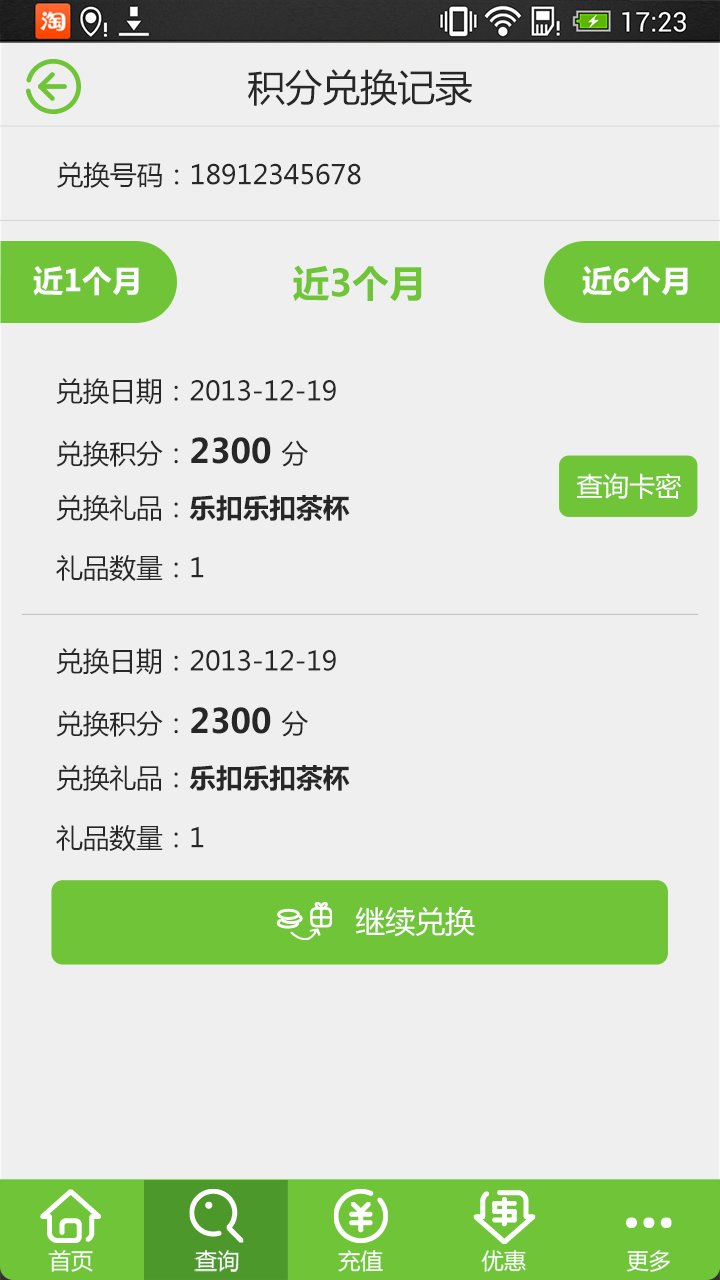
<style>
.page{position:relative;width:720px;height:1280px;background:#efefef}
.page>*{position:absolute;margin:0}
.t1{font:37.5px "MicrosoftYaHei";color:#272727}
.t2{font:26.7px "MicrosoftYaHei";color:#272727}
.t3{font:30px "MicrosoftYaHei-Bold";color:#fdfdfd}
.t4{font:36.7px "MicrosoftYaHei-Bold";color:#6fc537}
.t5{font:26.7px/56.7px "MicrosoftYaHei";color:#272727}
.t6{font:26.7px/60px "MicrosoftYaHei";color:#272727}
.t7{font:33.3px/60px "MicrosoftYaHei-Bold";color:#272727}
.t8{font:26.7px/60px "MicrosoftYaHei-Bold";color:#272727}
.t9{font:26.3px "MicrosoftYaHei";color:#ffffff}
.t10{font:30px "MicrosoftYaHei";color:#ffffff}
.t11{font:22.2px "MicrosoftYaHei";color:#ffffff}
</style>
<div class="page">
<p class="t1" style="left:248px;top:69px;width:224px;height:37px">积分兑换记录</p>
<p class="t2" style="left:57px;top:161px;width:304px;height:27px">兑换号码：18912345678</p>
<p class="t3" style="left:33px;top:266px;width:106px;height:30px">近1个月</p>
<p class="t4" style="left:293px;top:265px;width:129px;height:37px">近3个月</p>
<p class="t3" style="left:582px;top:266px;width:106px;height:30px">近6个月</p>
<p class="t5" style="left:56px;top:378px;width:294px;height:204px">兑换日期：2013-12-19<br><span class="t6">兑换积分：</span><span class="t7">2300 </span><span class="t6">分<br>兑换礼品：</span><span class="t8">乐扣乐扣茶杯<br></span><span class="t6">礼品数量：1</span></p>
<p class="t9" style="left:576px;top:473px;width:105px;height:26px">查询卡密</p>
<p class="t5" style="left:56px;top:648px;width:294px;height:204px">兑换日期：2013-12-19<br><span class="t6">兑换积分：</span><span class="t7">2300 </span><span class="t6">分<br>兑换礼品：</span><span class="t8">乐扣乐扣茶杯<br></span><span class="t6">礼品数量：1</span></p>
<p class="t10" style="left:355px;top:906px;width:120px;height:31px">继续兑换</p>
<p class="t11" style="left:48px;top:1250px;width:45px;height:22px">首页</p>
<p class="t11" style="left:194px;top:1250px;width:45px;height:22px">查询</p>
<p class="t11" style="left:338px;top:1250px;width:45px;height:22px">充值</p>
<p class="t11" style="left:481px;top:1250px;width:46px;height:22px">优惠</p>
<p class="t11" style="left:626px;top:1250px;width:44px;height:22px">更多</p>
</div>
